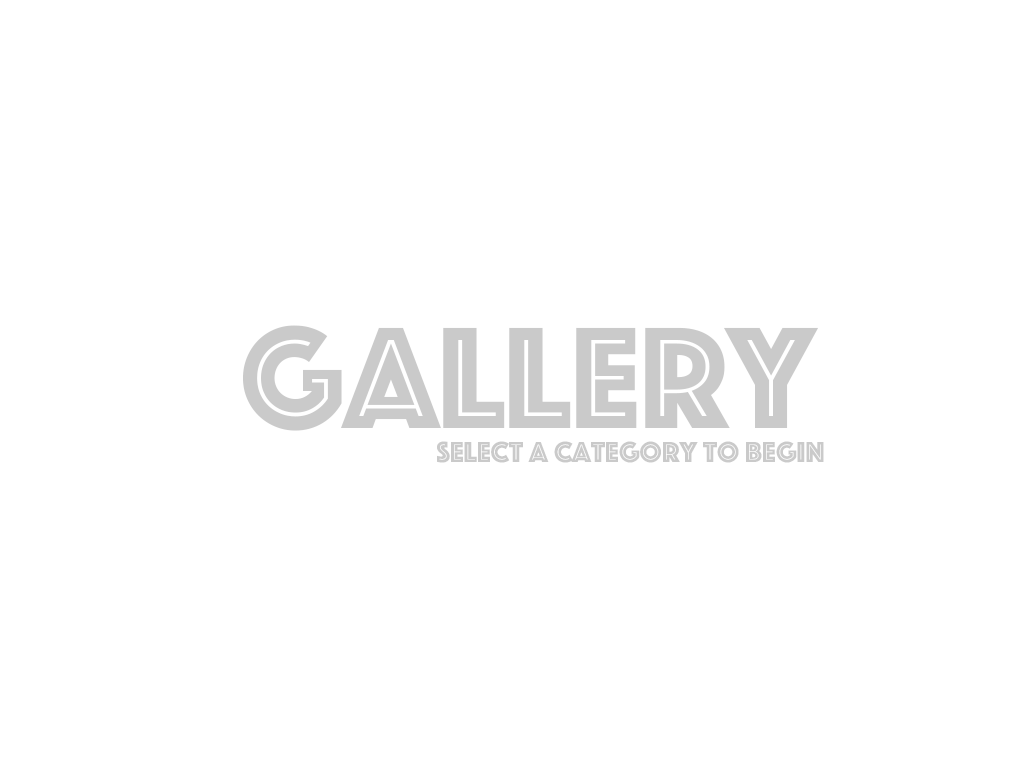
<style>
.page{position:relative;width:1024px;height:768px;background:#ffffff}
.page>*{position:absolute;margin:0}
.t1{font:150px "Phosphate-Inline";color:#cacaca}
.t2{font:30px "Phosphate-Inline";color:#cacaca}
</style>
<div class="page">
<p class="t1" style="left:243px;top:325px;width:576px;height:106px">Gallery</p>
<p class="t2" style="left:437px;top:441px;width:387px;height:22px">Select a category to begin</p>
</div>
